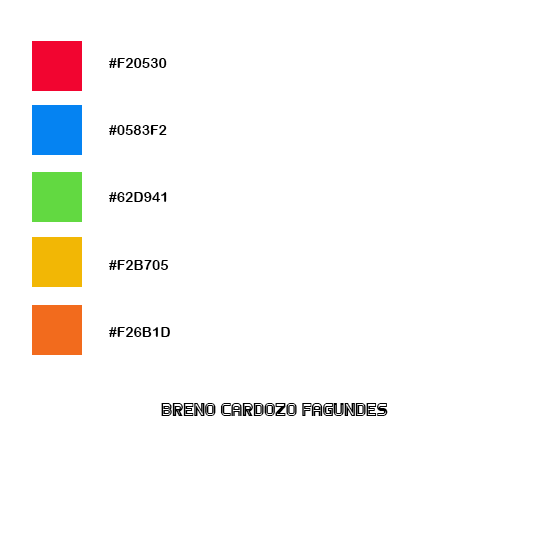
<style>
.page{position:relative;width:550px;height:550px;background:#ffffff}
.page>*{position:absolute;margin:0}
.t1{font:14px "ArialRoundedMTBold";color:#000000}
.t2{font:18px "Games-Regular";color:#000000}
</style>
<div class="page">
<p class="t1" style="left:109px;top:58px;width:61px;height:279px">#F20530<br><br><br><br>#0583F2<br><br><br><br>#62D941<br><br><br><br>#F2B705<br><br><br><br>#F26B1D</p>
<p class="t2" style="left:161px;top:403px;width:227px;height:13px">Breno Cardozo Fagundes</p>
</div>
